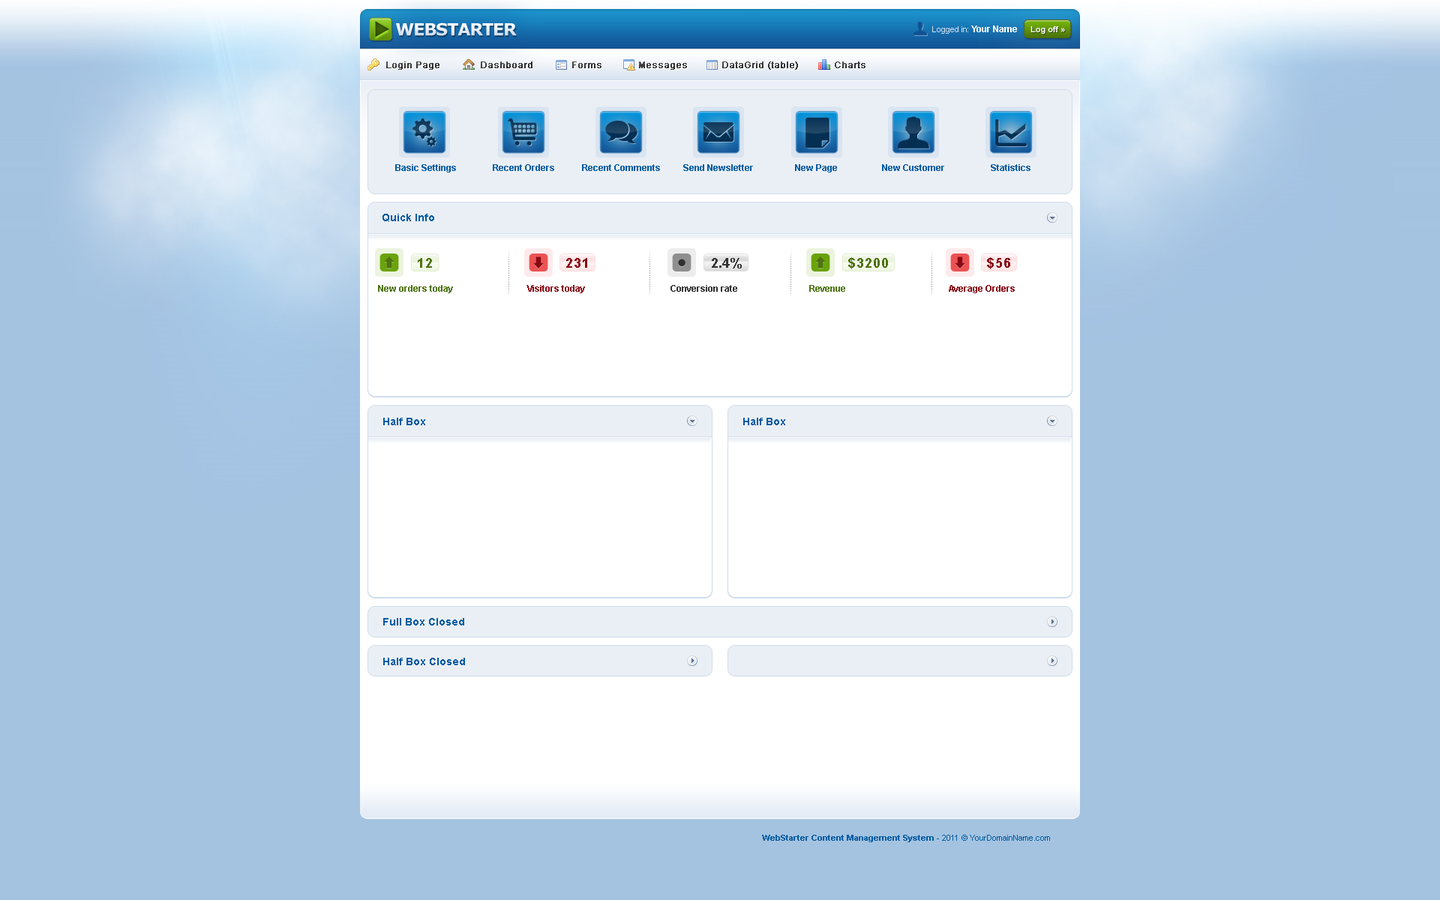
<style>
.page{position:relative;width:1440px;height:900px;background:#a4c3e0}
.page>*{position:absolute;margin:0}
.t1{font:16.8px "Verdana-Bold";letter-spacing:-0.05em;color:#ebf0f7;text-transform:uppercase}
.t2{font:8.2px "ArialMT";color:#d5dfee}
.t3{font:9px "Arial-BoldMT";color:#ffffff}
.t4{font:8.2px "Arial-BoldMT";color:#ffffff}
.t5{font:9px "ArialMT";color:#333333;font-weight:bold}
.t6{font:9px "Arial-BoldMT";color:#005ca2}
.t7{font:10.5px "Arial-BoldMT";color:#005ca2}
.t8{font:13.5px "Arial-BoldMT";letter-spacing:0.05em;color:#4e7310}
.t9{font:13.5px "Arial-BoldMT";letter-spacing:0.05em;color:#870812}
.t10{font:13.5px "Arial-BoldMT";color:#333333}
.t11{font:9px "Arial-BoldMT";color:#4e7310}
.t12{font:9px "Arial-BoldMT";color:#870812}
.t13{font:9px "Arial-BoldMT";color:#333333}
.t14{font:8.2px "Arial-BoldMT";color:#005ca2}
.t15{font:8.2px "ArialMT";color:#005ca2}
</style>
<div class="page">
<p class="t1" style="left:396px;top:22px;width:121px;height:14px">WebStarter</p>
<p class="t2" style="left:932px;top:26px;width:85px;height:8px">Logged in: <span class="t3">Your Name</span></p>
<p class="t4" style="left:1030px;top:26px;width:35px;height:8px">Log off »</p>
<p class="t5" style="left:386px;top:62px;width:54px;height:8px">Login Page</p>
<p class="t5" style="left:481px;top:62px;width:51px;height:6px">Dashboard</p>
<p class="t5" style="left:572px;top:62px;width:30px;height:6px">Forms</p>
<p class="t5" style="left:639px;top:62px;width:48px;height:8px">Messages</p>
<p class="t5" style="left:722px;top:62px;width:76px;height:8px">DataGrid (table)</p>
<p class="t5" style="left:835px;top:62px;width:31px;height:6px">Charts</p>
<p class="t6" style="left:395px;top:164px;width:61px;height:8px">Basic Settings</p>
<p class="t6" style="left:493px;top:164px;width:61px;height:7px">Recent Orders</p>
<p class="t6" style="left:582px;top:164px;width:78px;height:7px">Recent Comments</p>
<p class="t6" style="left:683px;top:164px;width:70px;height:7px">Send Newsletter</p>
<p class="t6" style="left:795px;top:164px;width:42px;height:8px">New Page</p>
<p class="t6" style="left:882px;top:164px;width:62px;height:7px">New Customer</p>
<p class="t6" style="left:991px;top:164px;width:39px;height:7px">Statistics</p>
<p class="t7" style="left:382px;top:214px;width:52px;height:8px">Quick Info</p>
<p class="t8" style="left:848px;top:257px;width:40px;height:12px">$3200</p>
<p class="t9" style="left:987px;top:257px;width:23px;height:12px">$56</p>
<p class="t8" style="left:418px;top:258px;width:14px;height:10px">12</p>
<p class="t9" style="left:566px;top:258px;width:21px;height:10px">231</p>
<p class="t10" style="left:712px;top:258px;width:30px;height:10px">2.4%</p>
<p class="t11" style="left:378px;top:285px;width:75px;height:8px">New orders today</p>
<p class="t12" style="left:526px;top:285px;width:59px;height:8px">Visitors today</p>
<p class="t13" style="left:670px;top:285px;width:67px;height:7px">Conversion rate</p>
<p class="t11" style="left:809px;top:285px;width:36px;height:7px">Revenue</p>
<p class="t12" style="left:949px;top:285px;width:66px;height:8px">Average Orders</p>
<p class="t7" style="left:383px;top:418px;width:42px;height:7px">Half Box</p>
<p class="t7" style="left:743px;top:418px;width:42px;height:7px">Half Box</p>
<p class="t7" style="left:383px;top:618px;width:81px;height:8px">Full Box Closed</p>
<p class="t7" style="left:383px;top:658px;width:82px;height:7px">Half Box Closed</p>
<p class="t14" style="left:762px;top:835px;width:288px;height:7px">WebStarter Content Management System<span class="t15"> - 2011 © YourDomainName.com</span></p>
</div>
